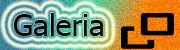
<style>
.page{position:relative;width:180px;height:50px}
.page>*{position:absolute;margin:0}
.t1{font:30px "Tahoma";color:#000000}
</style>
<div class="page">
<p class="t1" style="left:14px;top:13px;width:89px;height:23px">Galeria</p>
</div>
